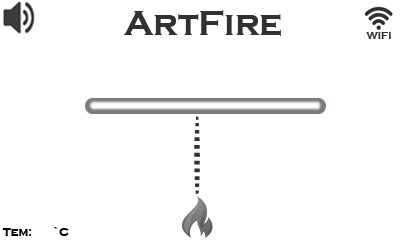
<style>
.page{position:relative;width:400px;height:240px;background:#ffffff}
.page>*{position:absolute;margin:0}
.t1{font:36px "CopperplateGothic-Bold";color:#313131}
.t2{font:10px "CopperplateGothic-Bold";color:#313131}
.t3{font:12.6px "CopperplateGothic-Bold";color:#313131;scale:1.22 1}
.t4{font:12px "CopperplateGothic-Bold";color:#000000}
</style>
<div class="page">
<p class="t1" style="left:124px;top:10px;width:157px;height:26px">ArtFire</p>
<p class="t2" style="left:366px;top:32px;width:25px;height:7px">WIFI</p>
<p class="t3" style="left:194px;top:116px;width:6px;height:78px;rotate:90deg">- - - - - - - - - - -</p>
<p class="t4" style="left:2px;top:227px;width:67px;height:9px">Tem:       `C</p>
</div>
